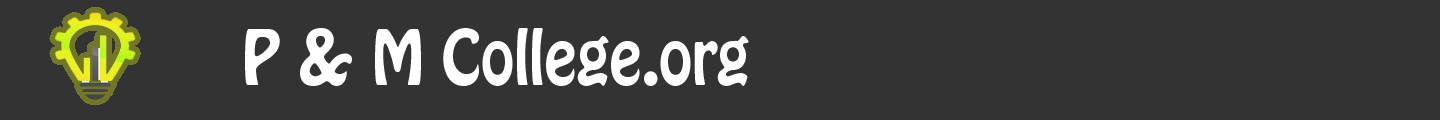
<style>
.page{position:relative;width:1440px;height:120px;background:#333333}
.page>*{position:absolute;margin:0}
.t1{font:66.8px "HoboStd";color:#ffffff;scale:0.9 1}
</style>
<div class="page">
<p class="t1" style="left:245px;top:28px;width:504px;height:58px">P &amp; M College.org</p>
</div>
